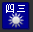
<style>
.page{position:relative;width:33px;height:32px;background:#000090}
.page>*{position:absolute;margin:0}
.t1{font:10.4px "SimSun";color:#ffffff}
</style>
<div class="page">
<p class="t1" style="left:6px;top:4px;width:19px;height:9px">四三</p>
</div>
